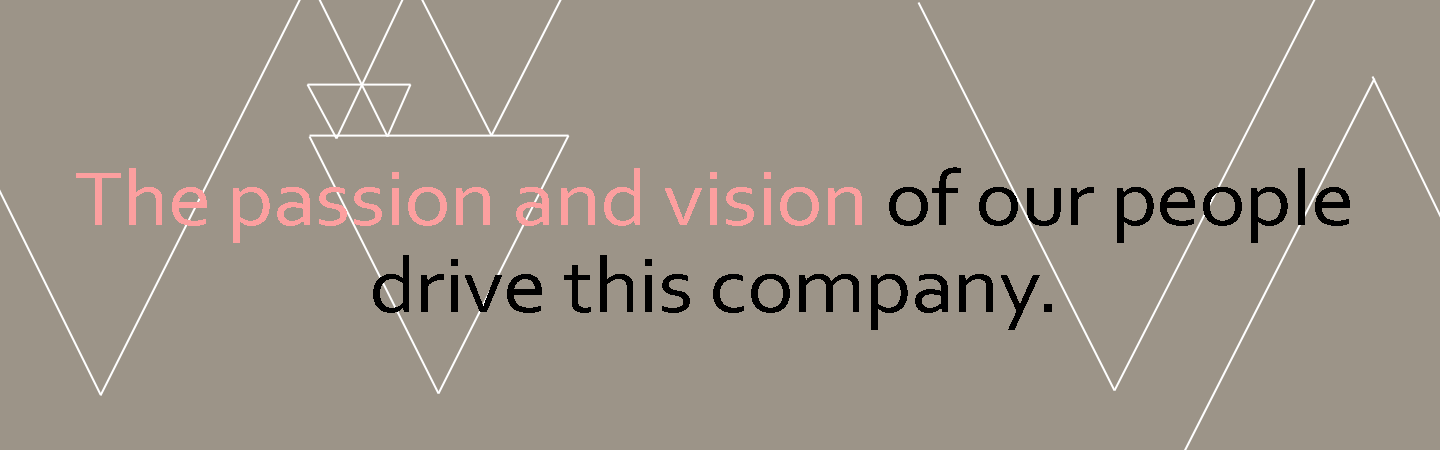
<style>
.page{position:relative;width:1440px;height:450px;background:#9c9488}
.page>*{position:absolute;margin:0}
.t1{font:80px/86.6px "Corbel";letter-spacing:-0.01em;color:#000000;scale:1.1 1}
.t2{font:80px/86.6px "Corbel";letter-spacing:-0.01em;color:#fc9f9f;scale:1.1 1}
</style>
<div class="page">
<p class="t1" style="left:76px;top:167px;width:1274px;height:163px;text-align:center"><span class="t2">The passion and vision</span> of our people<br>drive this company.</p>
</div>
